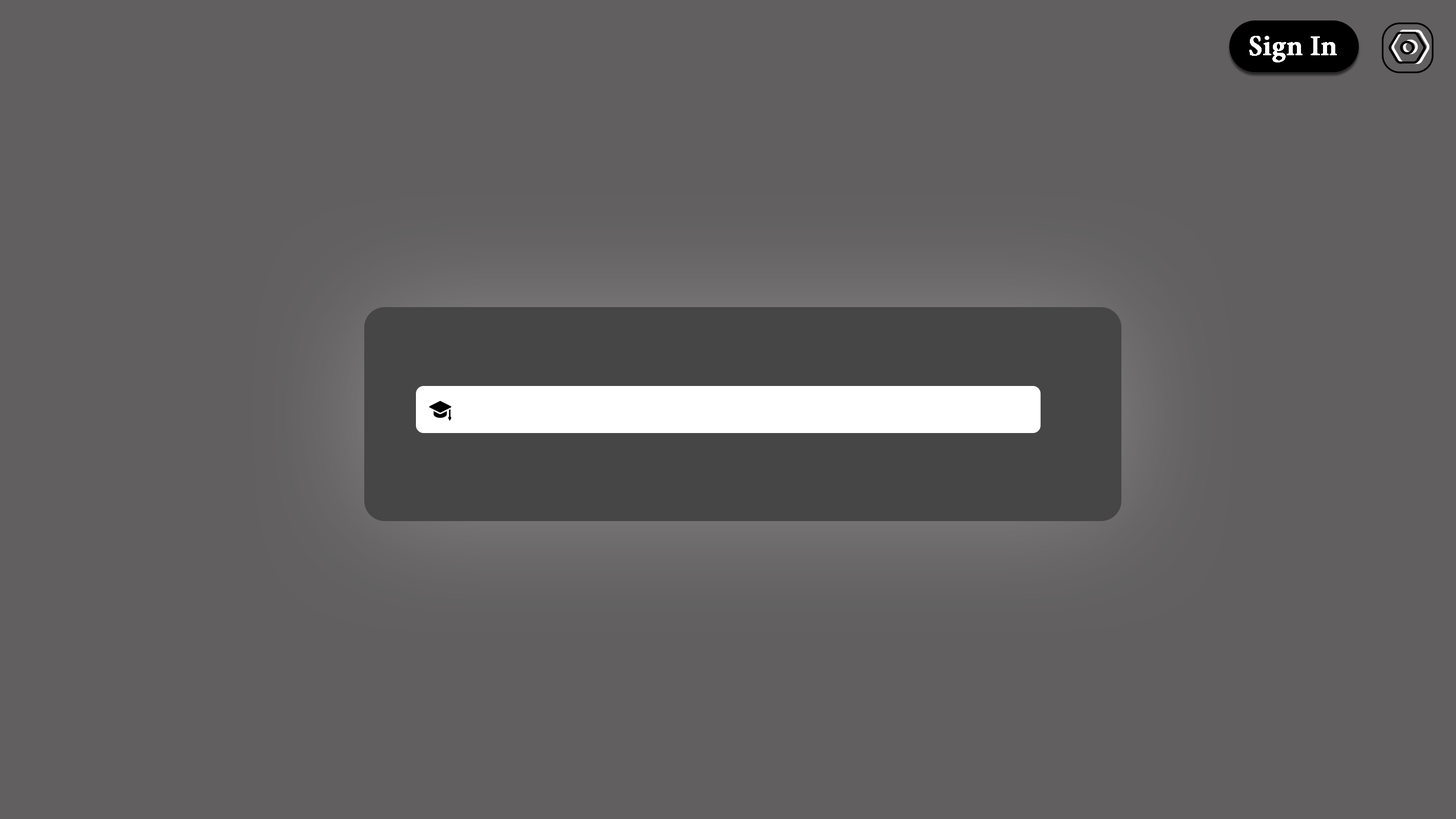
<style>
.page{position:relative;width:1456px;height:819px;background:#615f5f}
.page>*{position:absolute;margin:0}
.t1{font:30.8px "AdobeGurmukhi-Bold";color:#ffffff;font-weight:bold}
</style>
<div class="page">
<p class="t1" style="left:1250px;top:36px;width:87px;height:26px">Sign In</p>
</div>
